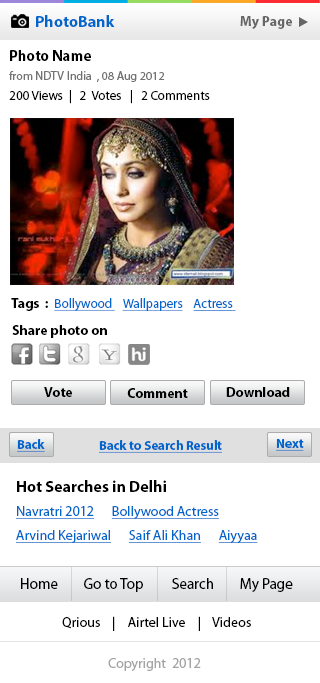
<style>
.page{position:relative;width:320px;height:683px;background:#ffffff}
.page>*{position:absolute;margin:0}
.t1{font:16px "MyriadPro-Bold";color:#0066cc}
.t2{font:14px "MyriadPro-Bold";color:#666666}
.t3{font:15px "MyriadPro-Bold";color:#000000}
.t4{font:12px "MyriadPro-Regular";color:#737373}
.t5{font:13px "MyriadPro-Regular";color:#000000}
.t6{font:13px "MyriadPro-Regular";color:#0066cc;text-decoration:underline}
.t7{font:14px "MyriadPro-Bold";color:#000000}
.t8{font:13px "MyriadPro-Bold";color:#0066cc;text-decoration:underline}
.t9{font:16px "MyriadPro-Bold";color:#000000}
.t10{font:14px/24px "MyriadPro-Regular";color:#0066cc;text-decoration:underline}
.t11{font:15px "MyriadPro-Regular";color:#000000}
.t12{font:14px "MyriadPro-Regular";color:#000000}
.t13{font:14px "MyriadPro-Regular";color:#a3a3a3}
</style>
<div class="page">
<p class="t1" style="left:36px;top:15px;width:79px;height:12px">PhotoBank</p>
<p class="t2" style="left:240px;top:16px;width:52px;height:13px">My Page</p>
<p class="t3" style="left:10px;top:50px;width:81px;height:11px">Photo Name</p>
<p class="t4" style="left:9px;top:71px;width:156px;height:11px">from NDTV India  , 08 Aug 2012</p>
<p class="t5" style="left:9px;top:90px;width:201px;height:14px">200 Views  |   2  Votes   |   2 Comments</p>
<p class="t6" style="left:11px;top:298px;width:225px;height:13px"><span class="t7">Tags  :  </span>Bollywood    Wallpapers    Actress</p>
<p class="t7" style="left:12px;top:325px;width:95px;height:13px">Share photo on</p>
<p class="t7" style="left:44px;top:387px;width:28px;height:10px">Vote</p>
<p class="t7" style="left:127px;top:388px;width:61px;height:10px">Comment</p>
<p class="t7" style="left:226px;top:387px;width:64px;height:10px">Download</p>
<p class="t8" style="left:17px;top:439px;width:28px;height:13px">Back</p>
<p class="t8" style="left:99px;top:440px;width:124px;height:13px">Back to Search Result</p>
<p class="t8" style="left:276px;top:439px;width:28px;height:12px">Next</p>
<p class="t9" style="left:17px;top:480px;width:149px;height:12px">Hot Searches in Delhi</p>
<p class="t10" style="left:16px;top:506px;width:242px;height:37px">Navratri 2012      Bollywood Actress     <br>Arvind Kejariwal      Saif Ali Khan      Aiyyaa</p>
<p class="t11" style="left:21px;top:578px;width:272px;height:14px">Home        Go to Top         Search        My Page</p>
<p class="t12" style="left:62px;top:616px;width:189px;height:15px">Qrious    |    Airtel Live    |    Videos</p>
<p class="t13" style="left:108px;top:658px;width:93px;height:13px">Copyright  2012</p>
</div>
